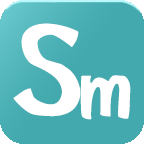
<style>
.page{position:relative;width:144px;height:144px;background:#43a9ae}
.page>*{position:absolute;margin:0}
.t1{font:120px "HYsanB";letter-spacing:0.13em;color:#ffffff}
.t2{font:90px "HYbsrB";letter-spacing:0.13em;color:#ffffff}
</style>
<div class="page">
<p class="t1" style="left:13px;top:23px;width:68px;height:94px">S</p>
<p class="t2" style="left:80px;top:75px;width:51px;height:45px">m</p>
</div>
